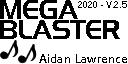
<style>
.page{position:relative;width:128px;height:64px;background:#ffffff}
.page>*{position:absolute;margin:0}
.t1{font:24px/20px "HighlandGothicFLF";color:#000000}
.t2{font:9.7px "Helvetica";letter-spacing:0.002em;color:#000000;scale:0.9 1}
.t3{font:11px "Helvetica";letter-spacing:0.002em;color:#000000;scale:0.9 1}
.t4{font:12.3px "SegoeUI-Semibold";color:#000000}
</style>
<div class="page">
<p class="t1" style="left:0px;top:0px;width:120px;height:39px">MEGA<br>BLASTER</p>
<p class="t2" style="left:78px;top:1px;width:49px;height:7px">2020 - V.2.<span class="t3">5</span></p>
<p class="t4" style="left:39px;top:54px;width:88px;height:9px">Aidan Lawrence</p>
</div>
